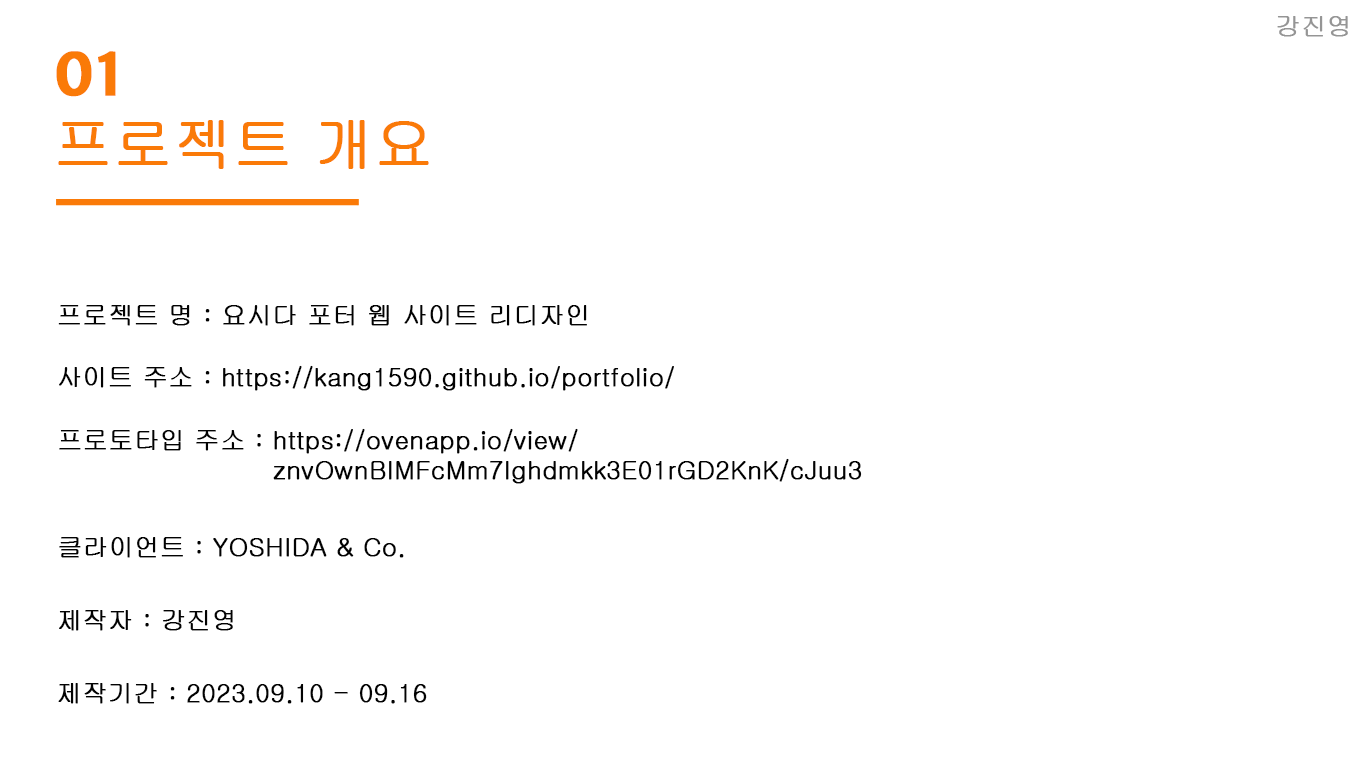
<style>
.page{position:relative;width:1370px;height:770px;background:#ffffff}
.page>*{position:absolute;margin:0}
.t1{font:25px "New-Gulim";color:#959595;font-weight:bold}
.t2{font:58.3px "Gulim";color:#fa7a08;font-weight:bold}
.t3{font:58.3px "MerriweatherSans-SemiBold";color:#fa7a08;font-weight:bold}
.t4{font:25px "New-Gulim";color:#020202;font-weight:bold}
</style>
<div class="page">
<p class="t1" style="left:1277px;top:16px;width:71px;height:21px">강진영</p>
<p class="t2" style="left:56px;top:51px;width:373px;height:118px;text-align:justify"><span class="t3">01<br></span>프로젝트 개요</p>
<p class="t4" style="left:58px;top:305px;width:529px;height:21px">프로젝트 명 : 요시다 포터 웹 사이트 리디자인</p>
<p class="t4" style="left:59px;top:365px;width:615px;height:26px">사이트 주소 : https://kang1590.github.io/portfolio/</p>
<p class="t4" style="left:59px;top:428px;width:803px;height:56px;text-align:justify">프로토타입 주소 : https://ovenapp.io/view/<br>                        znvOwnBIMFcMm7Ighdmkk3E01rGD2KnK/cJuu3</p>
<p class="t4" style="left:59px;top:537px;width:345px;height:21px">클라이언트 : YOSHIDA &amp; Co.</p>
<p class="t4" style="left:59px;top:610px;width:174px;height:21px">제작자 : 강진영</p>
<p class="t4" style="left:58px;top:683px;width:369px;height:21px">제작기간 : 2023.09.10 - 09.16</p>
</div>
